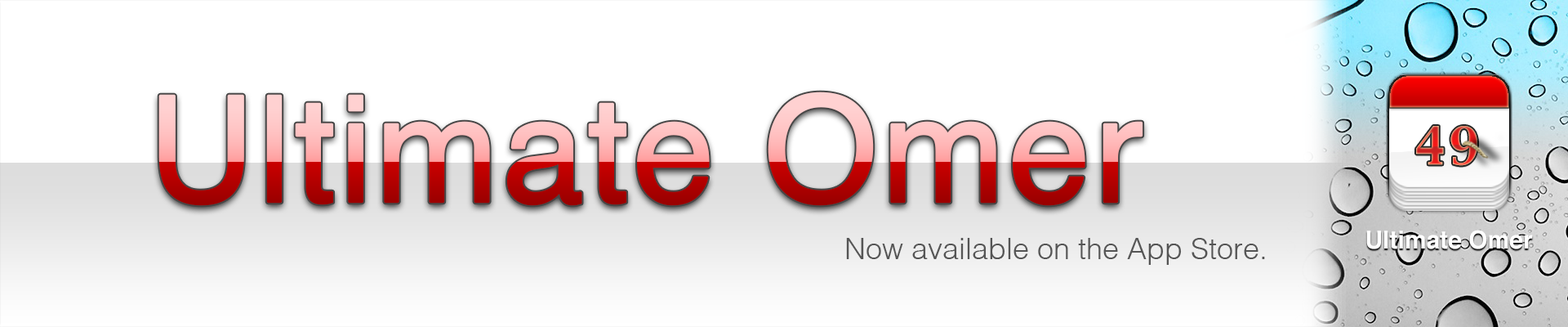
<style>
.page{position:relative;width:1568px;height:327px;background:#ffffff}
.page>*{position:absolute;margin:0}
.t1{font:147px "Helvetica";font-weight:bold}
.t2{font:45.4px "CapitalsRegular";letter-spacing:0.07em;font-variant:small-caps}
.t3{font:24.5px "Helvetica-Bold";color:#ffffff}
.t4{font:29.4px "Helvetica-Light";color:#555555}
</style>
<div class="page">
<p class="t1" style="left:158px;top:91px;width:985px;height:115px">Ultimate Omer</p>
<p class="t2" style="left:1416px;top:126px;width:61px;height:40px">49</p>
<p class="t3" style="left:1366px;top:229px;width:167px;height:20px">Ultimate Omer</p>
<p class="t4" style="left:846px;top:238px;width:419px;height:27px">Now available on the App Store.</p>
</div>
